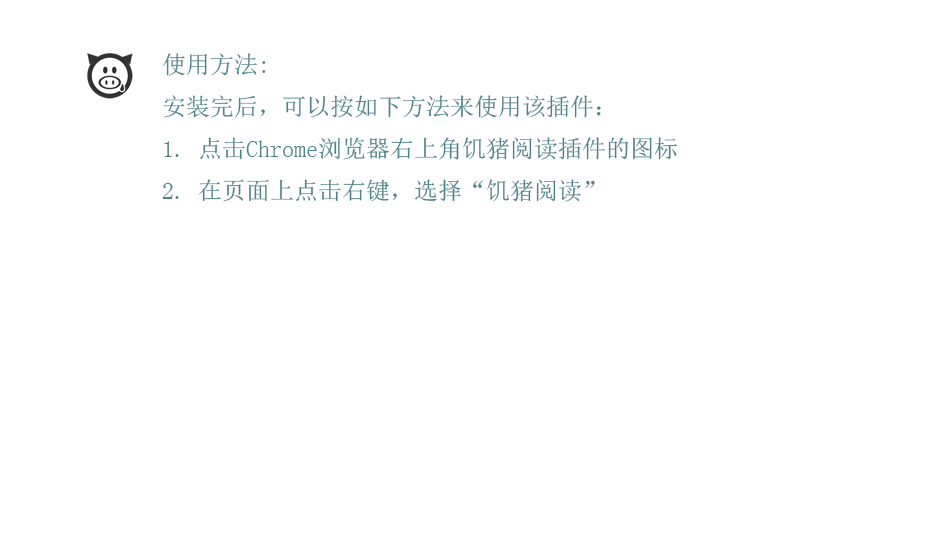
<style>
.page{position:relative;width:940px;height:540px;background:#ffffff}
.page>*{position:absolute;margin:0}
.t1{font:24px "SimSun";color:#4b848d}
</style>
<div class="page">
<p class="t1" style="left:163px;top:53px;width:514px;height:149px">使用方法:<br>安装完后，可以按如下方法来使用该插件：<br>1. 点击Chrome浏览器右上角饥猪阅读插件的图标<br>2. 在页面上点击右键，选择“饥猪阅读”</p>
</div>
